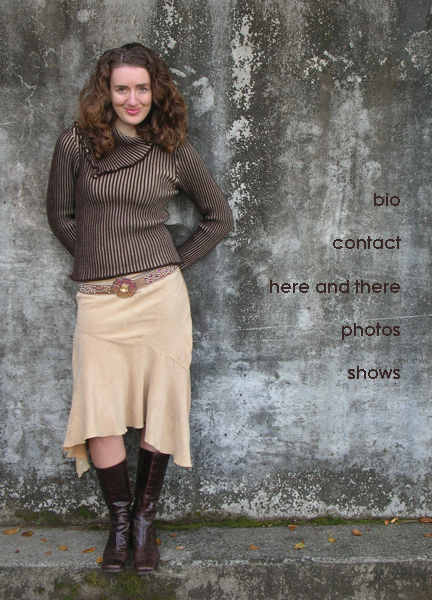
<style>
.page{position:relative;width:432px;height:600px}
.page>*{position:absolute;margin:0}
.t1{font:18px "CenturyGothic-Bold";color:#392725}
</style>
<div class="page">
<p class="t1" style="left:270px;top:193px;width:131px;height:186px;text-align:right">bio<br><br>contact<br><br>here and there<br><br>photos<br><br>shows</p>
</div>
